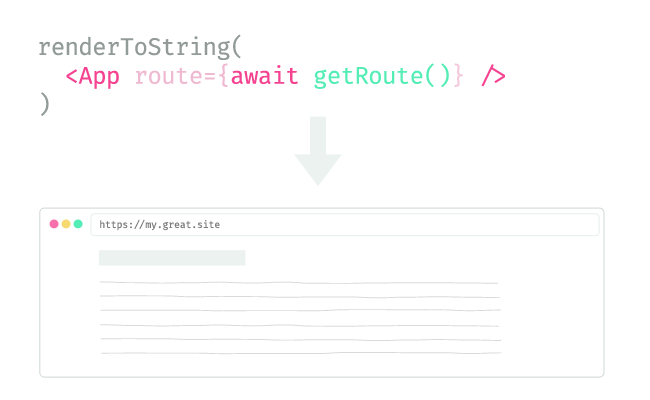
<style>
.page{position:relative;width:650px;height:400px;background:#ffffff}
.page>*{position:absolute;margin:0}
.t1{font:24px "FiraCode-Regular";letter-spacing:-0.025em;color:#929b98}
.t2{font:24px "FiraCode-Regular";letter-spacing:-0.025em;color:#f54391}
.t3{font:24px "FiraCode-Regular";letter-spacing:-0.025em;color:#efbad1}
.t4{font:24px "FiraCode-Regular";letter-spacing:-0.025em;color:#54edb5}
.t5{font:24px "FiraCode-Regular";letter-spacing:-0.025em;color:#f3cbdc}
.t6{font:10px "FiraCode-Regular";letter-spacing:-0.025em;color:#7b7b7b}
</style>
<div class="page">
<p class="t1" style="left:39px;top:34px;width:466px;height:82px">renderToString(<br>  <span class="t2">&lt;App </span><span class="t3">route={</span><span class="t2">await </span><span class="t4">getRoute()</span><span class="t5">}</span><span class="t2"> /&gt;<br></span>)</p>
<p class="t6" style="left:100px;top:219px;width:120px;height:12px">https://my.great.site</p>
</div>
